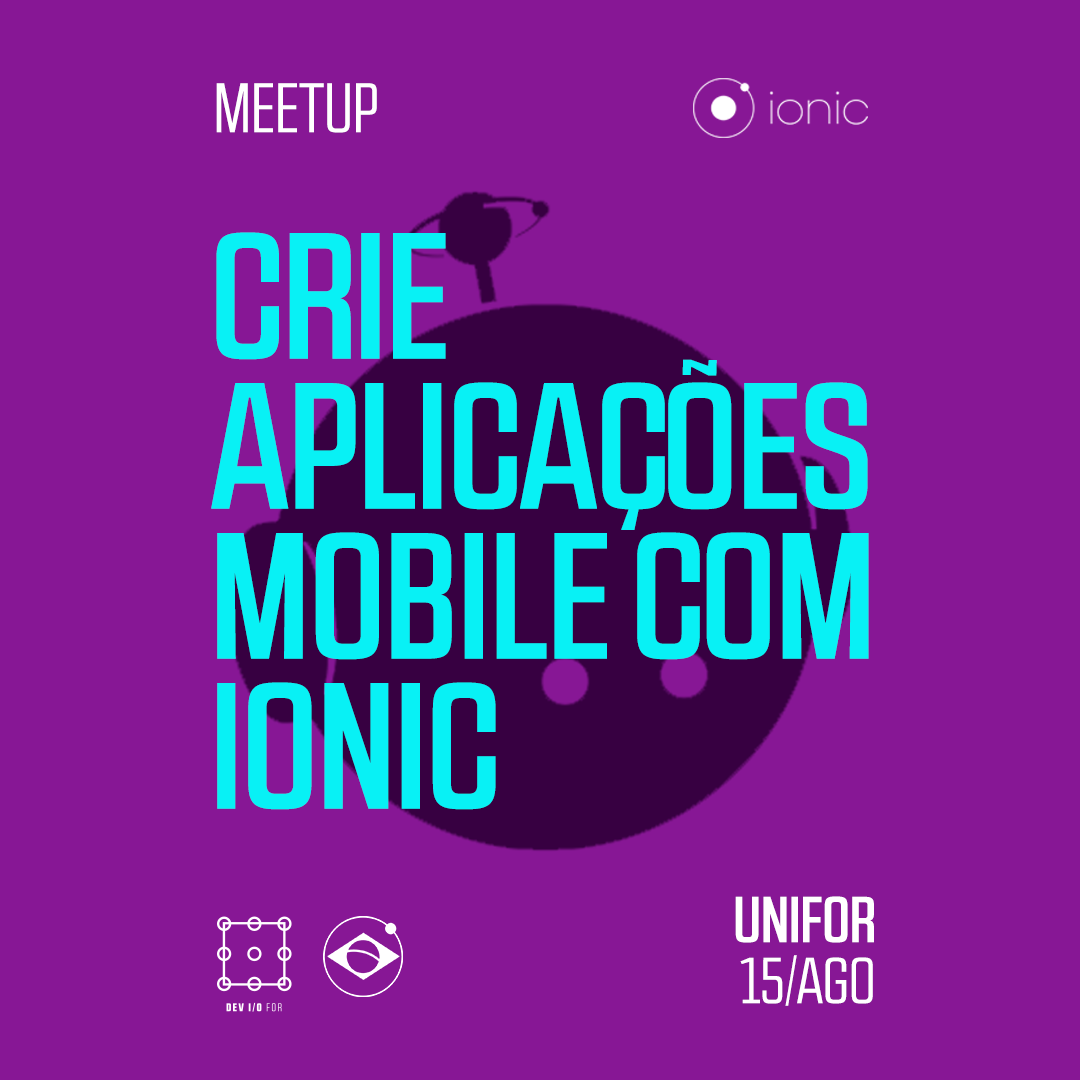
<style>
.page{position:relative;width:1080px;height:1080px;background:#871795}
.page>*{position:absolute;margin:0}
.t1{font:70px "RBNo2.1a-Book";color:#ffffff;text-transform:uppercase}
.t2{font:179.2px/150px "RBNo2.1a-Medium";color:#08f1f5;text-transform:uppercase}
.t3{font:65px/61px "RBNo2.1a-Medium";color:#ffffff;text-transform:uppercase}
.t4{font:65px/61px "RBNo2.1a-Book";color:#ffffff;text-transform:uppercase}
</style>
<div class="page">
<p class="t1" style="left:216px;top:83px;width:161px;height:50px">meetup</p>
<p class="t2" style="left:211px;top:232px;width:658px;height:578px">CRIE <br>APLICAÇÕES <br>MOBILE com<br>ionic</p>
<p class="t3" style="left:735px;top:896px;width:139px;height:110px;text-align:right">UNIFOR<br><span class="t4">15/AGO</span></p>
</div>
